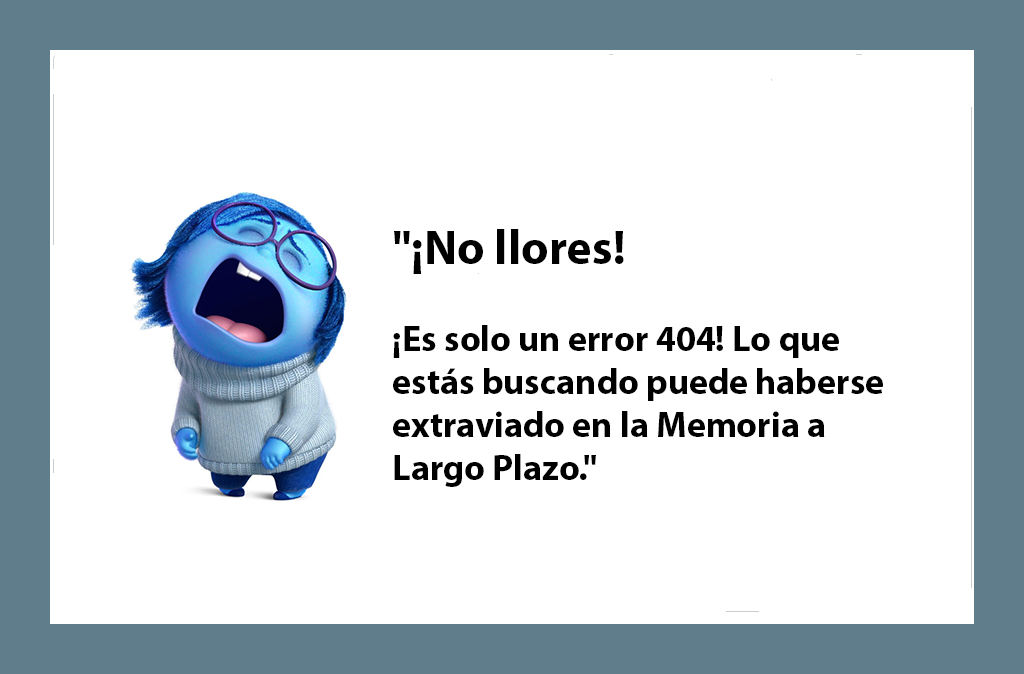
<style>
.page{position:relative;width:1024px;height:674px;background:#ffffff}
.page>*{position:absolute;margin:0}
.t1{font:36px "MyriadPro-Bold";color:#000000}
.t2{font:48px "MyriadPro-Bold";color:#000000}
</style>
<div class="page">
<p class="t1" style="left:393px;top:229px;width:490px;height:258px"><span class="t2">"¡No llores! <br></span><br>¡Es solo un error 404! Lo que estás buscando puede haberse extraviado en la Memoria a Largo Plazo."</p>
</div>
